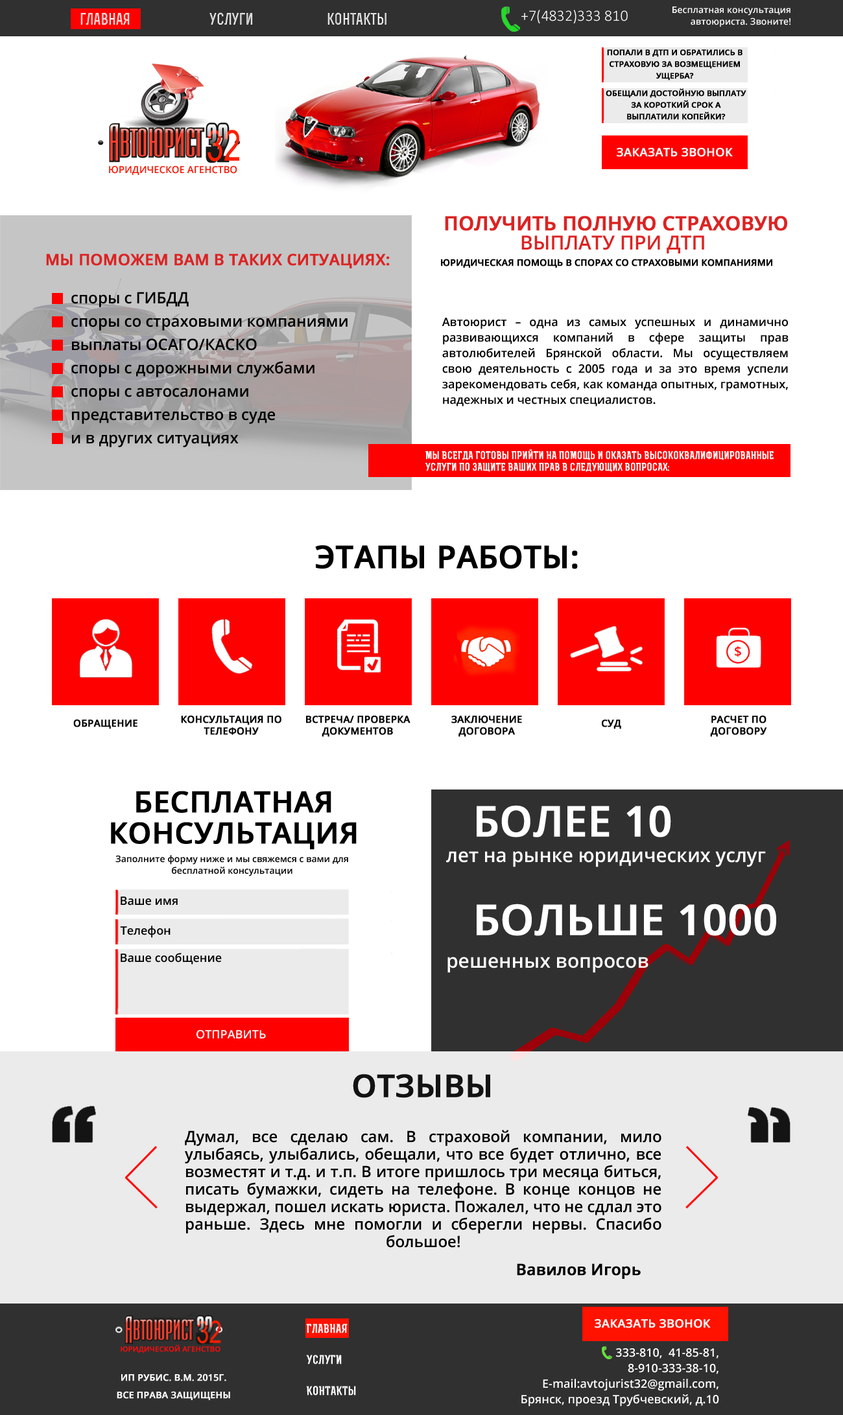
<style>
.page{position:relative;width:843px;height:1415px;background:#ffffff}
.page>*{position:absolute;margin:0}
.t1{font:15.6px "RexBoldInline";color:#fefffe}
.t2{font:15.6px "Calibri-Light";color:#fefffe}
.t3{font:9.1px/11.7px "OpenSans-Semibold";color:#fefffe}
.t4{font:7.8px/11.7px "OpenSans-Semibold";color:#000000;text-transform:uppercase;font-weight:bold}
.t5{font:11.7px "OpenSans-Semibold";color:#ffffff;text-transform:uppercase;font-weight:bold}
.t6{font:9.7px "OpenSans-Semibold";color:#fb1300;text-transform:uppercase}
.t7{font:19.4px/19.4px "OpenSans-Semibold";color:#dc2323;text-transform:uppercase;font-weight:bold}
.t8{font:19.4px/19.4px "OpenSans-Semibold";color:#dc2323;text-transform:uppercase}
.t9{font:15.6px "OpenSans-Semibold";color:#dc2323;text-transform:uppercase;font-weight:bold}
.t10{font:9.1px "OpenSans-Semibold";color:#000000;text-transform:uppercase;font-weight:bold}
.t11{font:15.6px/11.7px "OpenSans-Semibold";color:#000000}
.t12{font:11.7px/15.6px "OpenSans-Semibold";color:#000000}
.t13{font:10.4px/11.7px "RexBold";color:#ffffff;text-transform:uppercase;font-weight:bold}
.t14{font:10.4px/11.7px "RexBold";color:#000000;text-transform:uppercase;font-weight:bold}
.t15{font:31.1px "OpenSans-Semibold";color:#000000;text-transform:uppercase;font-weight:bold}
.t16{font:9.7px "OpenSans-Semibold";color:#000000;text-transform:uppercase;font-weight:bold}
.t17{font:9.7px/11.7px "OpenSans-Semibold";color:#000000;text-transform:uppercase;font-weight:bold}
.t18{font:29.2px/31.2px "OpenSans-Semibold";color:#000000;text-transform:uppercase;font-weight:bold}
.t19{font:42.1px "OpenSans-Semibold";color:#ffffff;text-transform:uppercase;font-weight:bold}
.t20{font:9.1px/11.7px "OpenSans-Semibold";color:#000000}
.t21{font:19.4px "OpenSans-Semibold";color:#ffffff}
.t22{font:11.7px "OpenSans-Semibold";color:#000000}
.t23{font:11.7px "OpenSans-Semibold";color:#ffffff;text-transform:uppercase}
.t24{font:31.1px "OpenSans-Semibold";color:#131313;text-transform:uppercase;font-weight:bold}
.t25{font:15.6px/17.5px "OpenSans-Semibold";color:#000000}
.t26{font:15.6px "OpenSans-Semibold";color:#000000;font-weight:bold}
.t27{font:11.7px/31.1px "RexBold";color:#ffffff;text-transform:uppercase;font-weight:bold}
.t28{font:7.1px "OpenSans-Semibold";color:#ff0909;text-transform:uppercase;font-weight:bold}
.t29{font:11.7px/15.6px "OpenSans-Semibold";color:#ffffff}
.t30{font:9.1px/17.5px "OpenSans-Semibold";color:#ffffff;text-transform:uppercase;font-weight:bold}
</style>
<div class="page">
<p class="t1" style="left:80px;top:13px;width:50px;height:12px">главная</p>
<p class="t1" style="left:209px;top:12px;width:43px;height:13px">услуги</p>
<p class="t1" style="left:327px;top:12px;width:59px;height:13px">контакты</p>
<p class="t2" style="left:521px;top:10px;width:106px;height:13px">+7(4832)333 810</p>
<p class="t3" style="left:672px;top:6px;width:119px;height:21px;text-align:right">Бесплатная консультация автоюриста. Звоните!</p>
<p class="t4" style="left:607px;top:49px;width:135px;height:31px;text-align:center">попали в ДТП и обратились в страховую за возмещением ущерба?</p>
<p class="t4" style="left:605px;top:88px;width:141px;height:32px;text-align:center">обещали достойную выплату за короткий срок а выплатили копейки?</p>
<p class="t5" style="left:616px;top:148px;width:116px;height:9px">заказать звонок</p>
<p class="t6" style="left:109px;top:166px;width:128px;height:9px">юридическое агенство</p>
<p class="t7" style="left:445px;top:216px;width:342px;height:37px;text-align:center">получить полную страховую<span class="t8"> выплату при ДТП</span></p>
<p class="t9" style="left:46px;top:253px;width:344px;height:15px">мы поможем вам в таких ситуациях:</p>
<p class="t10" style="left:441px;top:259px;width:331px;height:9px">юридическая помощь в спорах со страховыми компаниями</p>
<p class="t11" style="left:71px;top:292px;width:276px;height:155px">споры с ГИБДД <br><br>споры со страховыми компаниями<br> <br>выплаты ОСАГО/КАСКО<br><br>споры с дорожными службами<br><br>споры с автосалонами<br><br>представительство в суде<br><br>и в других ситуациях</p>
<p class="t12" style="left:441px;top:318px;width:347px;height:88px;text-align:justify">Автоюрист – одна из самых успешных и динамично развивающихся компаний в сфере защиты прав автолюбителей Брянской области. Мы осуществляем свою деятельность с 2005 года и за это время успели зарекомендовать себя, как команда опытных, грамотных, надежных и честных специалистов.</p>
<p class="t13" style="left:425px;top:449px;width:348px;height:23px"><span class="t14"><br></span>Мы всегда готовы прийти на помощь и оказать высококвалифицированные услуги по защите Ваших прав в следующих вопросах:</p>
<p class="t15" style="left:315px;top:545px;width:263px;height:24px">этапы работы:</p>
<p class="t16" style="left:73px;top:720px;width:64px;height:9px">обращение</p>
<p class="t17" style="left:181px;top:716px;width:100px;height:19px;text-align:center">консультация по телефону</p>
<p class="t17" style="left:306px;top:716px;width:104px;height:21px;text-align:center">встреча/ проверка документов</p>
<p class="t17" style="left:451px;top:716px;width:71px;height:21px;text-align:center">заключение договора</p>
<p class="t16" style="left:602px;top:720px;width:19px;height:9px">суд</p>
<p class="t17" style="left:710px;top:716px;width:57px;height:21px;text-align:center">расчет по договору</p>
<p class="t18" style="left:111px;top:791px;width:246px;height:59px;text-align:center">бесплатная консультация</p>
<p class="t19" style="left:476px;top:805px;width:195px;height:32px">БОЛЕЕ 10</p>
<p class="t20" style="left:115px;top:855px;width:233px;height:21px;text-align:center">Заполните форму ниже и мы свяжемся с вами для бесплатной консультации</p>
<p class="t21" style="left:446px;top:851px;width:320px;height:16px">лет на рынке юридических услуг</p>
<p class="t22" style="left:121px;top:896px;width:57px;height:10px">Ваше имя</p>
<p class="t19" style="left:476px;top:904px;width:300px;height:32px">больше 1000</p>
<p class="t22" style="left:120px;top:926px;width:50px;height:12px">Телефон</p>
<p class="t22" style="left:121px;top:953px;width:101px;height:12px">Ваше сообщение</p>
<p class="t21" style="left:447px;top:957px;width:201px;height:16px">решенных вопросов</p>
<p class="t23" style="left:196px;top:1030px;width:70px;height:9px">отправить</p>
<p class="t24" style="left:353px;top:1074px;width:137px;height:24px">отзывы</p>
<p class="t25" style="left:185px;top:1130px;width:476px;height:118px;text-align:justify">Думал, все сделаю сам. В страховой компании, мило улыбаясь, улыбались, обещали, что все будет отлично, все возместят и т.д. и т.п. В итоге пришлось три месяца биться, писать бумажки, сидеть на телефоне. В конце концов не выдержал, пошел искать юриста. Пожалел, что не сдлал это раньше. Здесь мне помогли и сберегли нервы. Спасибо большое!</p>
<p class="t26" style="left:517px;top:1263px;width:123px;height:16px">Вавилов Игорь</p>
<p class="t27" style="left:306px;top:1324px;width:50px;height:72px">главная<br>услуги<br>контакты</p>
<p class="t5" style="left:594px;top:1319px;width:116px;height:9px">заказать звонок</p>
<p class="t28" style="left:121px;top:1344px;width:99px;height:9px">юридической агенство</p>
<p class="t29" style="left:521px;top:1348px;width:198px;height:59px;text-align:right">333-810,  41-85-81,<br>8-910-333-38-10, <br> E-mail:avtojurist32@gmail.com, <br>Брянск, проезд Трубчевский, д.10</p>
<p class="t30" style="left:117px;top:1374px;width:113px;height:26px;text-align:justify">ИП РУбис. В.М. 2015г. <br>Все права защищены</p>
</div>
